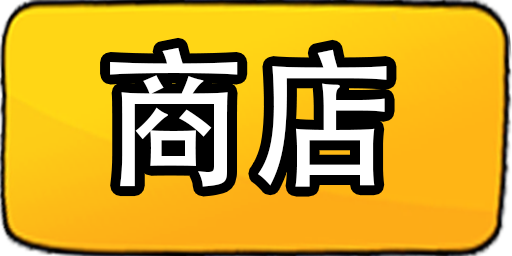
<style>
.page{position:relative;width:512px;height:256px}
.page>*{position:absolute;margin:0}
.t1{font:150px "AdobeHeitiStd-Regular";letter-spacing:0.012em;color:#ffffff}
</style>
<div class="page">
<p class="t1" style="left:110px;top:47px;width:277px;height:140px">商店</p>
</div>
